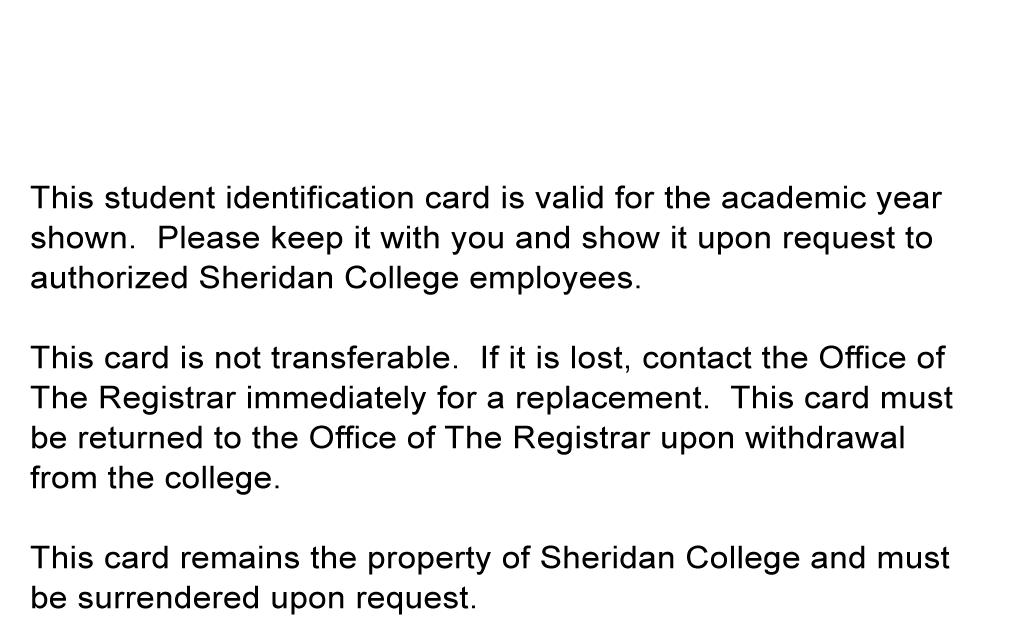
<style>
.page{position:relative;width:1011px;height:638px;background:#ffffff}
.page>*{position:absolute;margin:0}
.t1{font:31.3px "ArialMT";letter-spacing:0.01em;color:#000000;scale:1.06 1}
</style>
<div class="page">
<p class="t1" style="left:30px;top:185px;width:923px;height:430px">This student identification card is valid for the academic year<br>shown.  Please keep it with you and show it upon request to<br>authorized Sheridan College employees.<br><br>This card is not transferable.  If it is lost, contact the Office of<br>The Registrar immediately for a replacement.  This card must<br>be returned to the Office of The Registrar upon withdrawal<br>from the college.<br><br>This card remains the property of Sheridan College and must<br>be surrendered upon request.</p>
</div>
